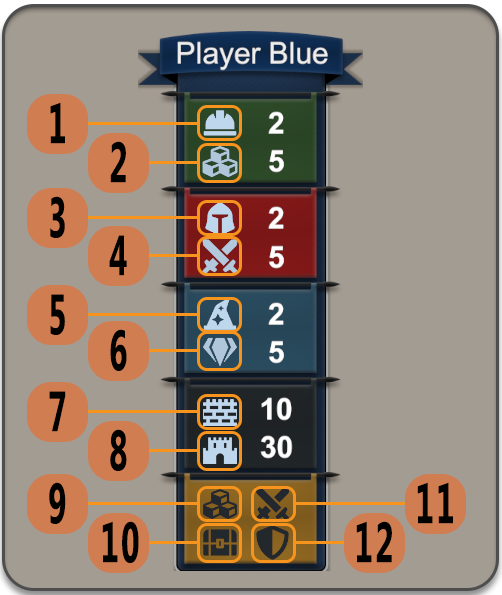
<style>
.page{position:relative;width:502px;height:595px;background:#a39c92}
.page>*{position:absolute;margin:0}
.t1{font:56.6px "MyanmarText-Bold";letter-spacing:0.07em;color:#010100;font-variant:small-caps;scale:0.56 1}
</style>
<div class="page">
<p class="t1" style="left:50px;top:102px;width:15px;height:42px">1</p>
<p class="t1" style="left:110px;top:141px;width:16px;height:42px">2</p>
<p class="t1" style="left:50px;top:196px;width:15px;height:42px">3</p>
<p class="t1" style="left:109px;top:235px;width:18px;height:41px">4</p>
<p class="t1" style="left:50px;top:294px;width:15px;height:41px">5</p>
<p class="t1" style="left:110px;top:329px;width:17px;height:42px">6</p>
<p class="t1" style="left:49px;top:391px;width:17px;height:41px">7</p>
<p class="t1" style="left:110px;top:429px;width:17px;height:42px">8</p>
<p class="t1" style="left:49px;top:482px;width:17px;height:42px">9</p>
<p class="t1" style="left:417px;top:482px;width:36px;height:42px">11</p>
<p class="t1" style="left:102px;top:521px;width:37px;height:42px">10</p>
<p class="t1" style="left:356px;top:521px;width:36px;height:42px">12</p>
</div>
